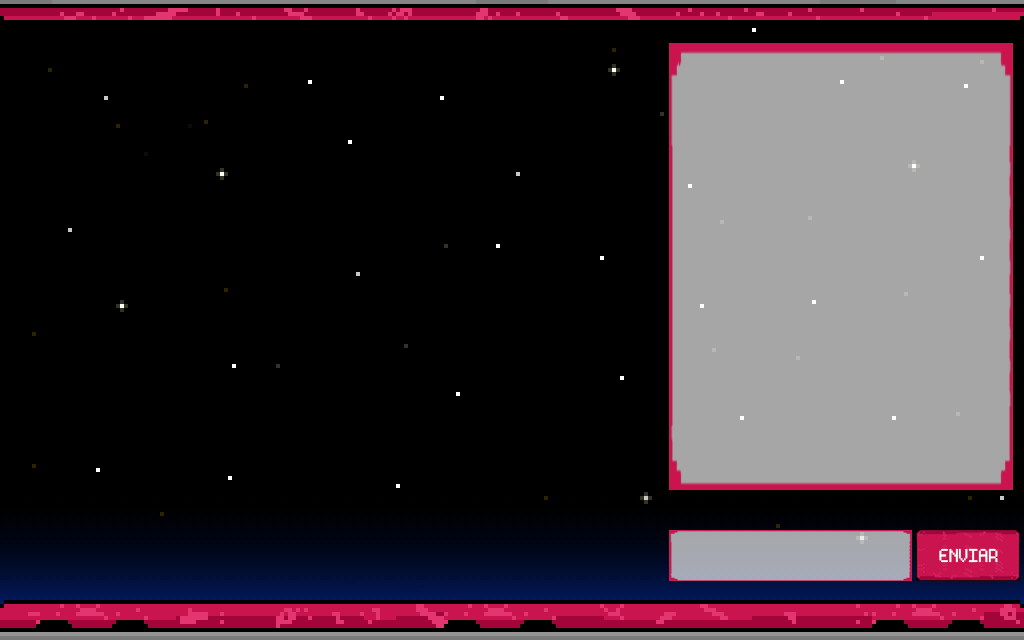
<style>
.page{position:relative;width:1024px;height:640px;background:#000000}
.page>*{position:absolute;margin:0}
.t1{font:29.9px "Essential";color:#fefefe;scale:0.88 1}
</style>
<div class="page">
<p class="t1" style="left:939px;top:548px;width:59px;height:15px">ENVIAR</p>
</div>
